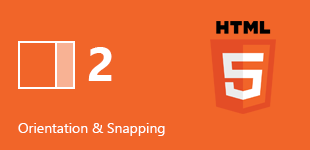
<style>
.page{position:relative;width:310px;height:150px;background:#f16529}
.page>*{position:absolute;margin:0}
.t1{font:48px "SegoeUI-Bold";color:#ffffff}
.t2{font:14px "SegoeUI";color:#ffffff}
</style>
<div class="page">
<p class="t1" style="left:88px;top:47px;width:24px;height:34px">2</p>
<p class="t2" style="left:18px;top:123px;width:147px;height:13px">Orientation &amp; Snapping</p>
</div>
